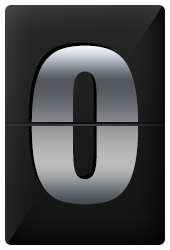
<style>
.page{position:relative;width:170px;height:250px}
.page>*{position:absolute;margin:0}
.t1{font:220px "HelveticaNeue-CondensedBlack";letter-spacing:0.05em;text-transform:uppercase}
</style>
<div class="page">
<p class="t1" style="left:31px;top:45px;width:107px;height:160px">0</p>
</div>
